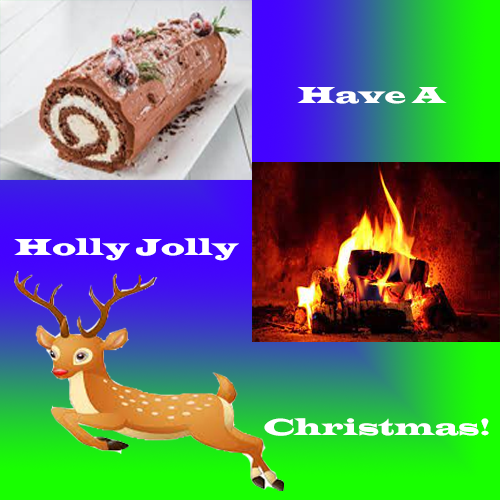
<style>
.page{position:relative;width:500px;height:500px}
.page>*{position:absolute;margin:0}
.t1{font:24px "LatinWide";color:#ffffff}
</style>
<div class="page">
<p class="t1" style="left:297px;top:87px;width:150px;height:17px">Have A</p>
<p class="t1" style="left:14px;top:238px;width:225px;height:23px">Holly Jolly</p>
<p class="t1" style="left:264px;top:418px;width:225px;height:18px">Christmas!</p>
</div>
